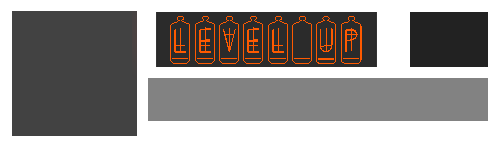
<style>
.page{position:relative;width:500px;height:150px;background:#ffffff}
.page>*{position:absolute;margin:0}
.t1{font:32px "BONX-TubeBold";color:#ff5a00}
</style>
<div class="page">
<p class="t1" style="left:170px;top:16px;width:192px;height:48px">LEVEL UP</p>
</div>
